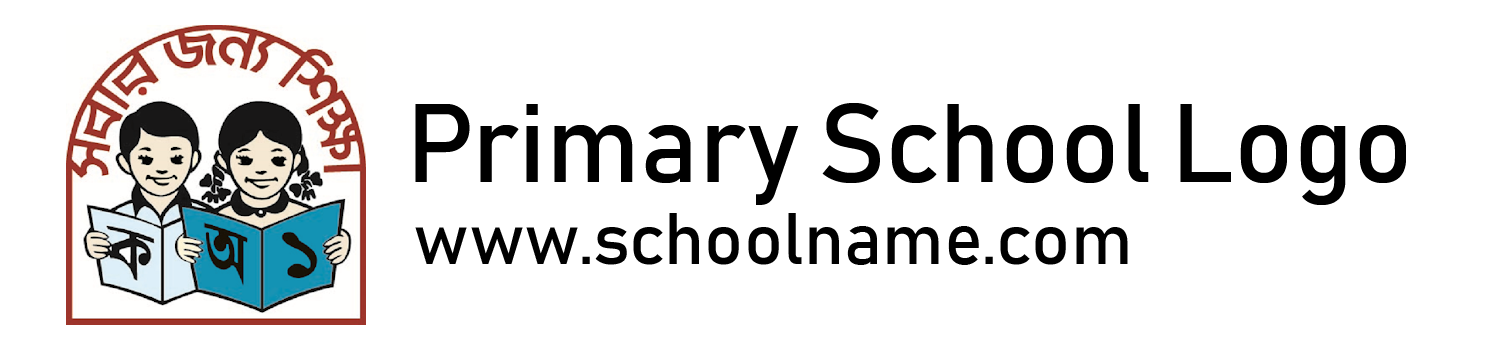
<style>
.page{position:relative;width:1500px;height:350px;background:#ffffff}
.page>*{position:absolute;margin:0}
.t1{font:110px "Bahnschrift";color:#000000}
.t2{font:72px "Bahnschrift";color:#000000}
</style>
<div class="page">
<p class="t1" style="left:415px;top:103px;width:991px;height:102px">Primary School Logo</p>
<p class="t2" style="left:415px;top:213px;width:713px;height:52px">www.schoolname.com</p>
</div>
